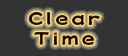
<style>
.page{position:relative;width:128px;height:56px;background:#333333}
.page>*{position:absolute;margin:0}
.t1{font:20px/20px "KakureiStd-EB";letter-spacing:0.16em}
</style>
<div class="page">
<p class="t1" style="left:28px;top:12px;width:72px;height:33px;text-align:center">Clear<br>Time</p>
</div>
